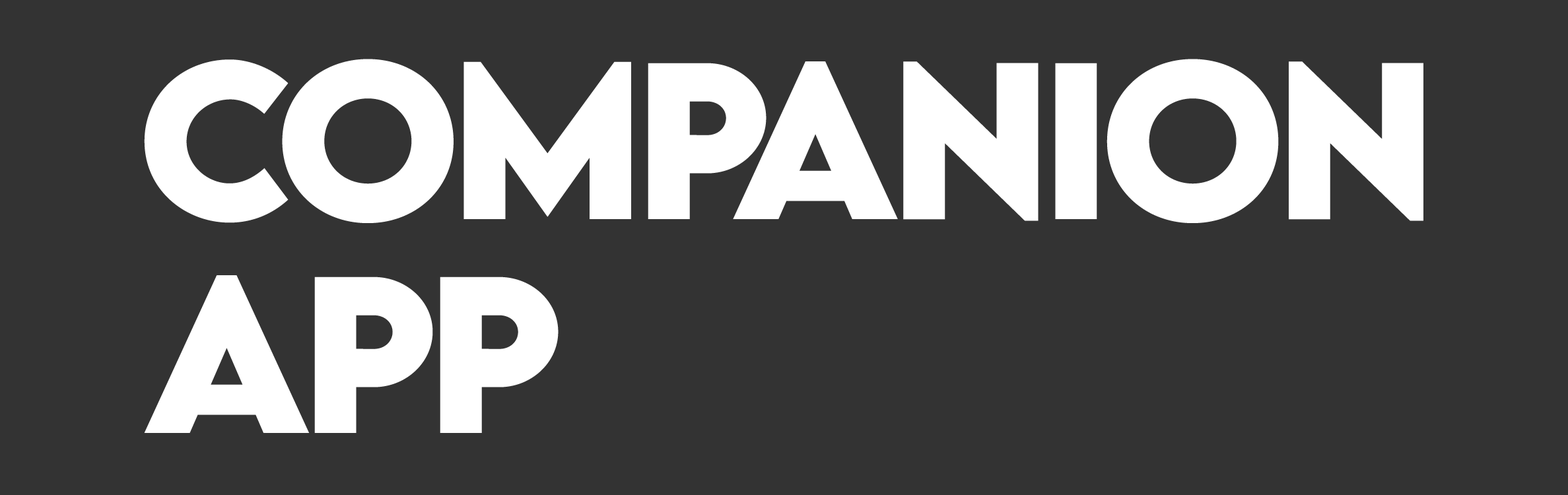
<style>
.page{position:relative;width:1568px;height:495px;background:#333333}
.page>*{position:absolute;margin:0}
.t1{font:198.1px "LEMONMILK-Bold";letter-spacing:-0.05em;color:#ffffff}
</style>
<div class="page">
<p class="t1" style="left:144px;top:59px;width:1279px;height:164px">COMPANION</p>
<p class="t1" style="left:144px;top:275px;width:415px;height:158px">APP</p>
</div>
